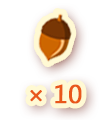
<style>
.page{position:relative;width:110px;height:120px;background:#ffffff}
.page>*{position:absolute;margin:0}
.t1{font:24px "MicrosoftYaHei";color:#e9571a;font-weight:bold}
</style>
<div class="page">
<p class="t1" style="left:30px;top:84px;width:52px;height:20px">× 10</p>
</div>
